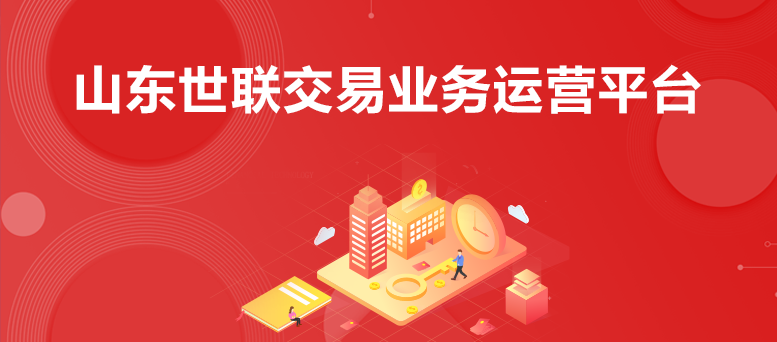
<style>
.page{position:relative;width:777px;height:342px}
.page>*{position:absolute;margin:0}
.t1{font:50px "MicrosoftYaHei-Bold";letter-spacing:0.05em;color:#ffffff}
</style>
<div class="page">
<p class="t1" style="left:76px;top:64px;width:625px;height:50px">山东世联交易业务运营平台</p>
</div>
